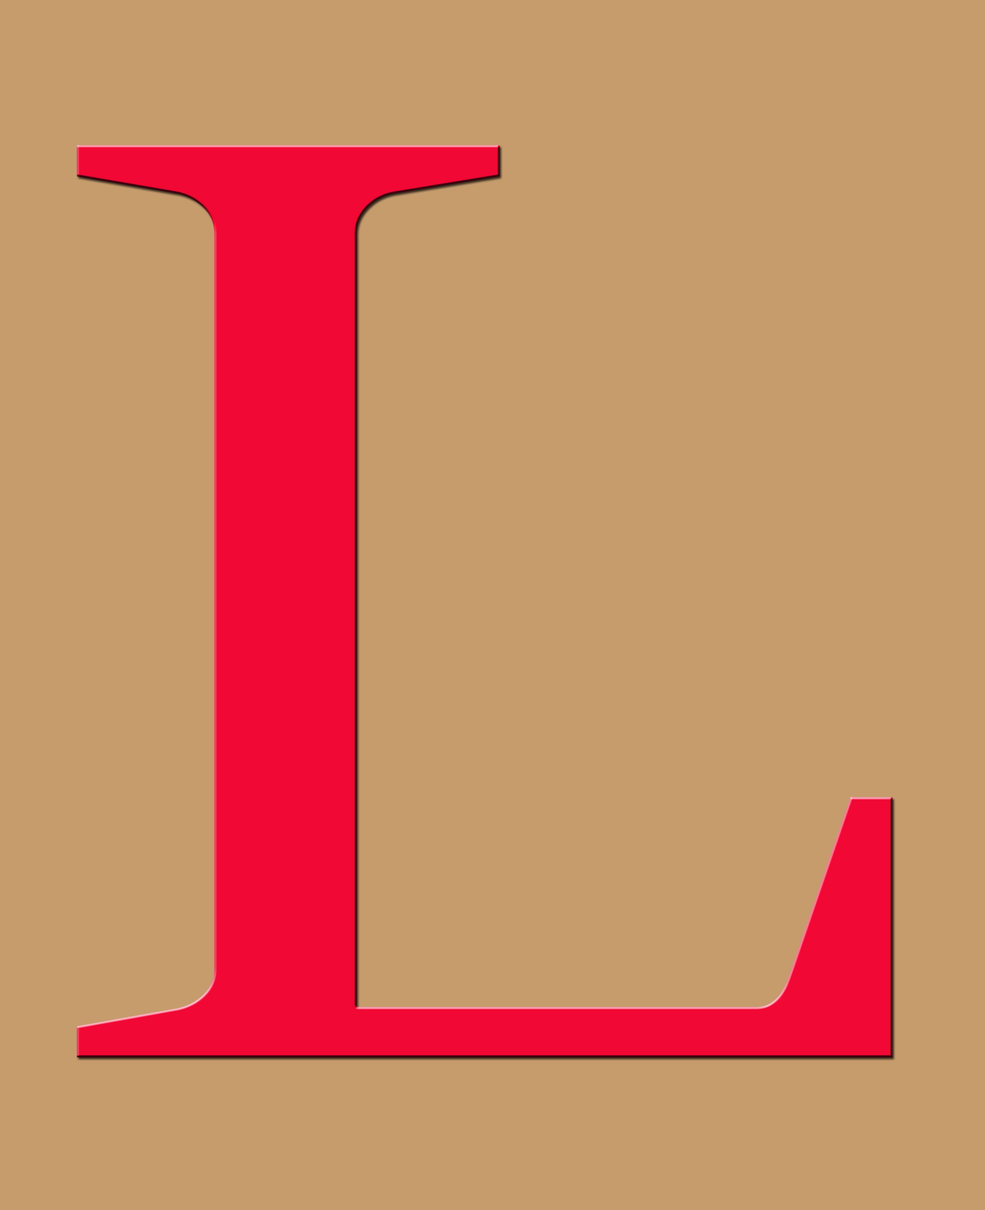
<style>
.page{position:relative;width:985px;height:1210px;background:#c69c6d}
.page>*{position:absolute;margin:0}
.t1{font:1489.8px "SitkaBanner";color:#f10834;scale:1.19 1}
</style>
<div class="page">
<p class="t1" style="left:77px;top:145px;width:816px;height:913px">L</p>
</div>
